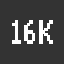
<style>
.page{position:relative;width:64px;height:64px;background:#333333}
.page>*{position:absolute;margin:0}
.t1{font:40.9px "Glasstown-NBP";letter-spacing:0.005em;color:#ffffff;font-weight:bold}
</style>
<div class="page">
<p class="t1" style="left:12px;top:20px;width:41px;height:24px">16K</p>
</div>
